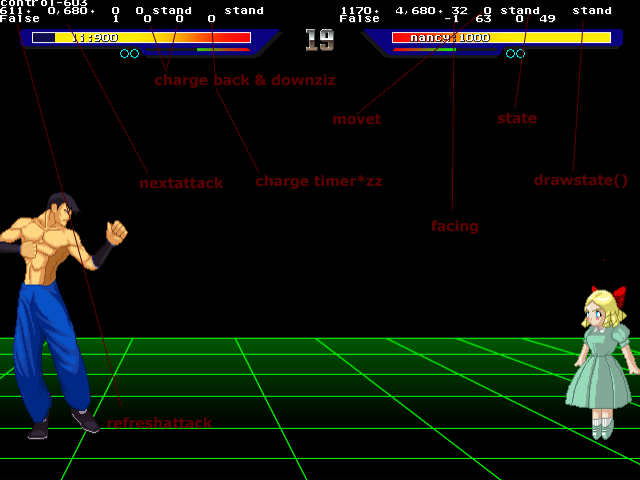
<style>
.page{position:relative;width:640px;height:480px;background:#000000}
.page>*{position:absolute;margin:0}
.t1{font:14px "Verdana-Bold";color:#5a0000}
</style>
<div class="page">
<p class="t1" style="left:155px;top:74px;width:180px;height:14px">charge back &amp; downziz</p>
<p class="t1" style="left:498px;top:113px;width:39px;height:11px">state</p>
<p class="t1" style="left:333px;top:114px;width:48px;height:11px">movet</p>
<p class="t1" style="left:534px;top:174px;width:93px;height:14px">drawstate()</p>
<p class="t1" style="left:140px;top:177px;width:84px;height:12px">nextattack</p>
<p class="t1" style="left:256px;top:175px;width:126px;height:14px">charge timer*zz</p>
<p class="t1" style="left:431px;top:220px;width:47px;height:14px">facing</p>
<p class="t1" style="left:107px;top:417px;width:106px;height:12px">refreshattack</p>
</div>
